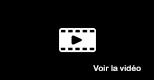
<style>
.page{position:relative;width:154px;height:80px;background:#000000}
.page>*{position:absolute;margin:0}
.t1{font:8px "ArialRoundedMTBold";color:#ffffff}
</style>
<div class="page">
<p class="t1" style="left:93px;top:65px;width:48px;height:6px">Voir la vidéo</p>
</div>
